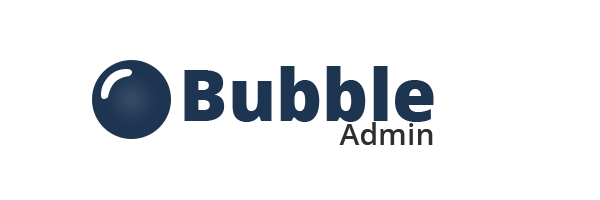
<style>
.page{position:relative;width:600px;height:200px;background:#ffffff}
.page>*{position:absolute;margin:0}
.t1{font:72px "OpenSans-ExtraBold";color:#1d3550}
.t2{font:30px "OpenSans-SemiBold";color:#302f2f}
</style>
<div class="page">
<p class="t1" style="left:184px;top:66px;width:250px;height:56px">Bubble</p>
<p class="t2" style="left:339px;top:122px;width:94px;height:23px">Admin</p>
</div>
